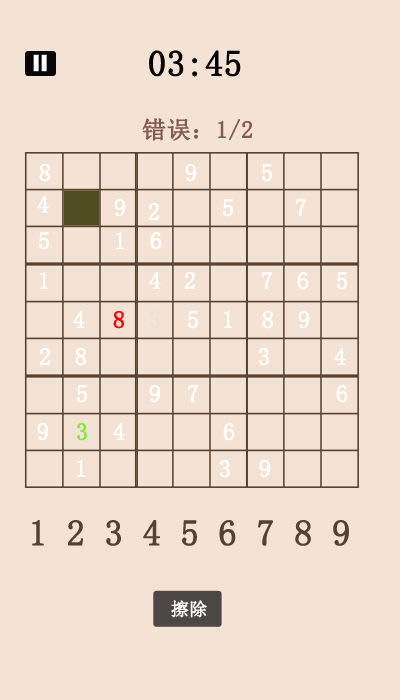
<style>
.page{position:relative;width:400px;height:700px;background:#f4e2d4}
.page>*{position:absolute;margin:0}
.t1{font:36px "SimSun";color:#020202;font-weight:bold}
.t2{font:24px "SimSun";color:#835b53;font-weight:bold}
.t3{font:24px "SimSun";color:#ffffff;font-weight:bold}
.t4{font:24px "SimSun";color:#fa0404;font-weight:bold}
.t5{font:24px "SimSun";color:#e3e3dc;font-weight:bold}
.t6{font:24px "SimSun";color:#76f033;font-weight:bold}
.t7{font:36px "SimSun";color:#564131;font-weight:bold}
.t8{font:18px "SimSun";color:#ffffff;font-weight:bold}
</style>
<div class="page">
<p class="t1" style="left:149px;top:50px;width:92px;height:27px">03:45</p>
<p class="t2" style="left:142px;top:118px;width:111px;height:23px">错误：1/2</p>
<p class="t3" style="left:39px;top:164px;width:11px;height:18px">8</p>
<p class="t3" style="left:185px;top:164px;width:12px;height:18px">9</p>
<p class="t3" style="left:262px;top:164px;width:10px;height:18px">5</p>
<p class="t3" style="left:37px;top:196px;width:12px;height:17px">4</p>
<p class="t3" style="left:114px;top:199px;width:12px;height:18px">9</p>
<p class="t3" style="left:148px;top:203px;width:11px;height:17px">2</p>
<p class="t3" style="left:223px;top:199px;width:10px;height:18px">5</p>
<p class="t3" style="left:296px;top:199px;width:10px;height:18px">7</p>
<p class="t3" style="left:39px;top:232px;width:10px;height:18px">5</p>
<p class="t3" style="left:116px;top:231px;width:8px;height:18px">1</p>
<p class="t3" style="left:150px;top:232px;width:12px;height:18px">6</p>
<p class="t3" style="left:40px;top:271px;width:8px;height:18px">1</p>
<p class="t3" style="left:149px;top:272px;width:12px;height:17px">4</p>
<p class="t3" style="left:184px;top:272px;width:11px;height:17px">2</p>
<p class="t3" style="left:262px;top:272px;width:10px;height:18px">7</p>
<p class="t3" style="left:297px;top:272px;width:12px;height:18px">6</p>
<p class="t3" style="left:337px;top:272px;width:10px;height:18px">5</p>
<p class="t3" style="left:73px;top:311px;width:12px;height:17px">4</p>
<p class="t4" style="left:113px;top:311px;width:11px;height:18px">8</p>
<p class="t5" style="left:150px;top:311px;width:10px;height:18px">3</p>
<p class="t3" style="left:188px;top:311px;width:10px;height:18px">5</p>
<p class="t3" style="left:224px;top:310px;width:8px;height:18px">1</p>
<p class="t3" style="left:262px;top:311px;width:11px;height:18px">8</p>
<p class="t3" style="left:298px;top:311px;width:12px;height:18px">9</p>
<p class="t3" style="left:39px;top:348px;width:11px;height:17px">2</p>
<p class="t3" style="left:75px;top:348px;width:11px;height:18px">8</p>
<p class="t3" style="left:259px;top:348px;width:10px;height:18px">3</p>
<p class="t3" style="left:334px;top:348px;width:12px;height:17px">4</p>
<p class="t3" style="left:77px;top:385px;width:10px;height:18px">5</p>
<p class="t3" style="left:149px;top:385px;width:12px;height:18px">9</p>
<p class="t3" style="left:188px;top:385px;width:10px;height:18px">7</p>
<p class="t3" style="left:336px;top:385px;width:12px;height:18px">6</p>
<p class="t3" style="left:37px;top:423px;width:12px;height:18px">9</p>
<p class="t6" style="left:77px;top:423px;width:10px;height:18px">3</p>
<p class="t3" style="left:113px;top:423px;width:12px;height:17px">4</p>
<p class="t3" style="left:223px;top:423px;width:12px;height:18px">6</p>
<p class="t3" style="left:77px;top:459px;width:8px;height:18px">1</p>
<p class="t3" style="left:220px;top:460px;width:10px;height:18px">3</p>
<p class="t3" style="left:259px;top:460px;width:12px;height:18px">9</p>
<p class="t7" style="left:32px;top:520px;width:317px;height:26px">1 2 3 4 5 6 7 8 9</p>
<p class="t8" style="left:171px;top:600px;width:36px;height:18px">擦除</p>
</div>
